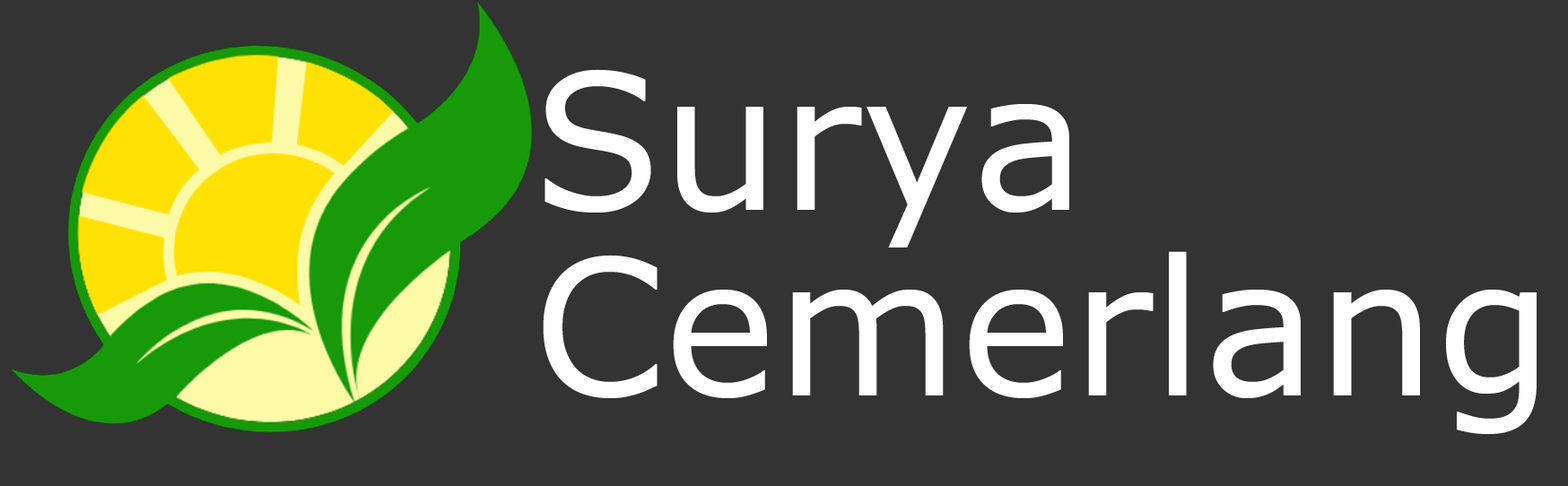
<style>
.page{position:relative;width:1568px;height:486px;background:#333333}
.page>*{position:absolute;margin:0}
.t1{font:188.4px/186.3px "Verdana";color:#fefefe}
</style>
<div class="page">
<p class="t1" style="left:543px;top:69px;width:994px;height:365px">Surya <br>Cemerlang</p>
</div>
